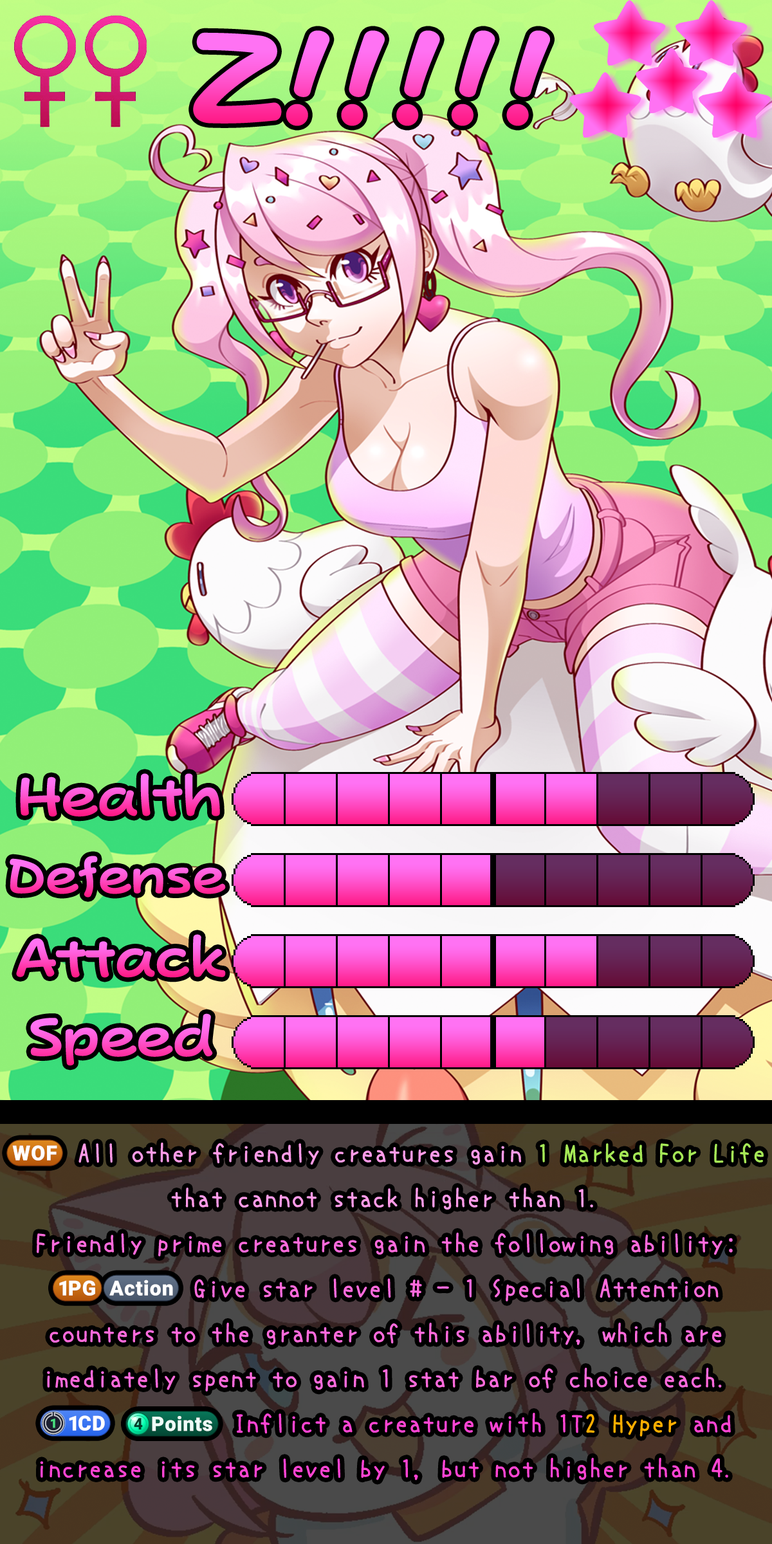
<style>
.page{position:relative;width:772px;height:1544px}
.page>*{position:absolute;margin:0}
.t1{font:225.2px "PopJoyStd-B"}
.t2{font:92.7px "PopJoyStd-B"}
.t3{font:83.6px "PopJoyStd-B"}
.t4{font:27px/45px "uzura_font";color:#ff6adc}
.t5{font:27px/45px "stoogedings-Regular";color:#ff9be8}
.t6{font:27px/45px "uzura_font";color:#ff9be8}
.t7{font:27px/45px "uzura_font";color:#a5e856}
.t8{font:27px/45px "stoogedings-Regular";color:#ff6adc}
.t9{font:27px/45px "stoogedings-Regular";letter-spacing:0.5em;color:#ff44d3}
.t10{font:26.3px/45px "stoogedings-Regular";color:#ff44d3}
.t11{font:27px/45px "uzura_font";color:#ff44d3}
.t12{font:27px/45px "uzura_font";color:#ffae00}
</style>
<div class="page">
<p class="t1" style="left:193px;top:30px;width:357px;height:96px">Z!!!!!</p>
<p class="t2" style="left:20px;top:773px;width:200px;height:44px">Health</p>
<p class="t3" style="left:10px;top:856px;width:216px;height:42px">Defense</p>
<p class="t2" style="left:16px;top:934px;width:210px;height:44px">Attack</p>
<p class="t2" style="left:30px;top:1013px;width:183px;height:53px">Speed</p>
<p class="t4" style="left:6px;top:1140px;width:758px;height:341px;text-align:center"><span class="t5">(WOF)</span><span class="t6"> All other friendly creatures gain </span><span class="t7">1 Marked For Life</span><span class="t6"> that cannot stack higher than 1.<br></span>Friendly prime creatures gain the following ability:<br><span class="t8">(1PG)(Action)</span> Give star level # - 1 Special Attention counters to the granter of this ability, which are imediately spent to gain 1 stat bar of choice each.<br><span class="t9">(1CD)</span><span class="t10">(4 points)</span><span class="t11"> Inflict a creature with 1T</span><span class="t12">2 Hyper</span><span class="t11"> and increase its star level by 1, but not higher than 4.</span></p>
</div>
